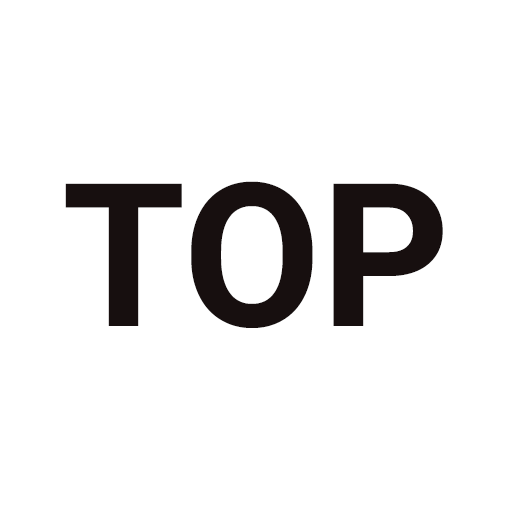
<style>
.page{position:relative;width:512px;height:512px;background:#ffffff}
.page>*{position:absolute;margin:0}
.t1{font:200px "Roboto-Bold";color:#170f0f}
</style>
<div class="page">
<p class="t1" style="left:65px;top:181px;width:378px;height:147px">TOP</p>
</div>
